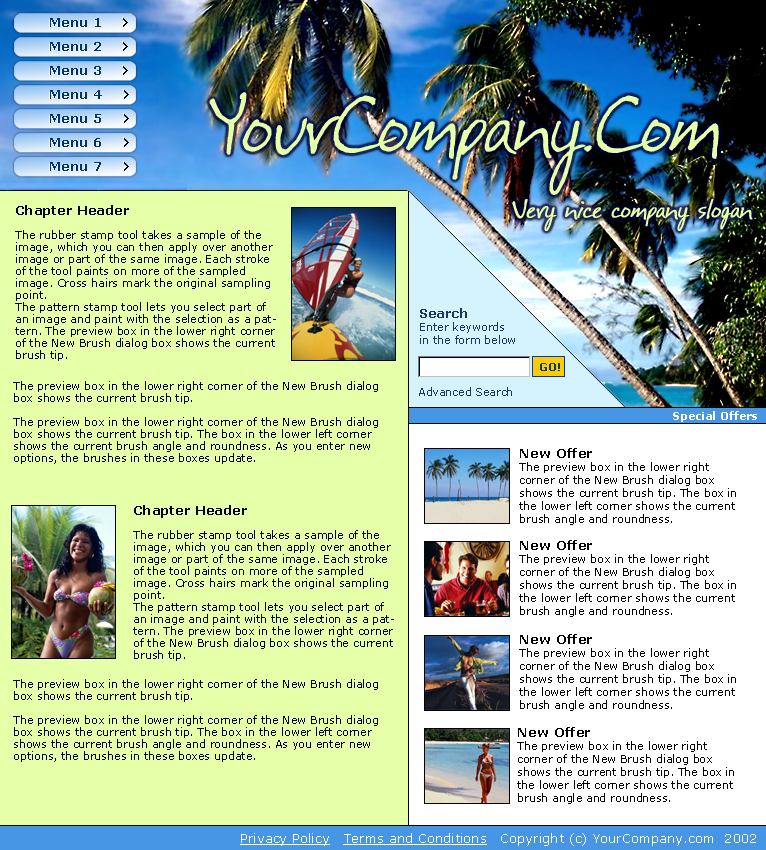
<style>
.page{position:relative;width:766px;height:850px;background:#e6ffa9}
.page>*{position:absolute;margin:0}
.t1{font:13px/24px "Verdana-Bold";color:#003366}
.t2{font:80px "Festus";color:#e6ffa9}
.t3{font:25px "Festus";color:#e6ffa9;font-weight:bold}
.t4{font:11px/12px "Verdana";color:#000000}
.t5{font:13px/12px "Verdana-Bold";color:#000000}
.t6{font:11px "Verdana";color:#1a355f}
.t7{font:12.7px "Verdana-Bold";color:#1a355f}
.t8{font:11px "Verdana-Bold";color:#003f68}
.t9{font:11px "Verdana-Bold";color:#ffffff}
.t10{font:11px/13px "Verdana";color:#000000}
.t11{font:13px/13px "Verdana-Bold";color:#000000}
.t12{font:12.7px "Verdana";letter-spacing:0.015em;color:#ffffff;text-decoration:underline}
.t13{font:12.7px "Verdana";letter-spacing:0.015em;color:#ffffff}
</style>
<div class="page">
<p class="t1" style="left:50px;top:18px;width:52px;height:153px">Menu 1<br>Menu 2<br>Menu 3<br>Menu 4<br>Menu 5<br>Menu 6<br>Menu 7</p>
<p class="t2" style="left:209px;top:92px;width:510px;height:103px">YourCompany.Com</p>
<p class="t3" style="left:512px;top:198px;width:241px;height:33px">Very nice company slogan</p>
<p class="t4" style="left:15px;top:205px;width:261px;height:156px"><span class="t5">Chapter Header<br></span><br>The rubber stamp tool takes a sample of the<br>image, which you can then apply over another<br>image or part of the same image. Each stroke<br>of the tool paints on more of the sampled<br>image. Cross hairs mark the original sampling<br>point.<br>The pattern stamp tool lets you select part of<br>an image and paint with the selection as a pat-<br>tern. The preview box in the lower right corner<br>of the New Brush dialog box shows the current<br>brush tip.</p>
<p class="t6" style="left:420px;top:308px;width:95px;height:36px"><span class="t7">Search<br></span>Enter keywords <br>in the form below</p>
<p class="t8" style="left:540px;top:363px;width:20px;height:8px">GO!</p>
<p class="t4" style="left:13px;top:381px;width:365px;height:83px">The preview box in the lower right corner of the New Brush dialog<br>box shows the current brush tip.<br><br>The preview box in the lower right corner of the New Brush dialog<br>box shows the current brush tip. The box in the lower left corner<br>shows the current brush angle and roundness. As you enter new<br>options, the brushes in these boxes update.</p>
<p class="t6" style="left:419px;top:387px;width:93px;height:9px">Advanced Search</p>
<p class="t9" style="left:673px;top:411px;width:84px;height:11px">Special Offers</p>
<p class="t10" style="left:519px;top:448px;width:217px;height:77px"><span class="t11">New Offer<br></span>The preview box in the lower right<br>corner of the New Brush dialog box<br>shows the current brush tip. The box in<br>the lower left corner shows the current<br>brush angle and roundness.</p>
<p class="t4" style="left:133px;top:505px;width:261px;height:156px"><span class="t5">Chapter Header<br></span><br>The rubber stamp tool takes a sample of the<br>image, which you can then apply over another<br>image or part of the same image. Each stroke<br>of the tool paints on more of the sampled<br>image. Cross hairs mark the original sampling<br>point.<br>The pattern stamp tool lets you select part of<br>an image and paint with the selection as a pat-<br>tern. The preview box in the lower right corner<br>of the New Brush dialog box shows the current<br>brush tip.</p>
<p class="t10" style="left:519px;top:540px;width:217px;height:77px"><span class="t11">New Offer<br></span>The preview box in the lower right<br>corner of the New Brush dialog box<br>shows the current brush tip. The box in<br>the lower left corner shows the current<br>brush angle and roundness.</p>
<p class="t10" style="left:519px;top:634px;width:217px;height:77px"><span class="t11">New Offer<br></span>The preview box in the lower right<br>corner of the New Brush dialog box<br>shows the current brush tip. The box in<br>the lower left corner shows the current<br>brush angle and roundness.</p>
<p class="t4" style="left:13px;top:679px;width:365px;height:83px">The preview box in the lower right corner of the New Brush dialog<br>box shows the current brush tip.<br><br>The preview box in the lower right corner of the New Brush dialog<br>box shows the current brush tip. The box in the lower left corner<br>shows the current brush angle and roundness. As you enter new<br>options, the brushes in these boxes update.</p>
<p class="t10" style="left:517px;top:727px;width:217px;height:77px"><span class="t11">New Offer<br></span>The preview box in the lower right<br>corner of the New Brush dialog box<br>shows the current brush tip. The box in<br>the lower left corner shows the current<br>brush angle and roundness.</p>
<p class="t12" style="left:240px;top:833px;width:516px;height:13px">Privacy Policy   Terms and Conditions<span class="t13">   Copyright (c) YourCompany.com  2002</span></p>
</div>
